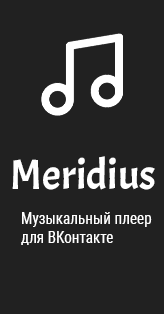
<style>
.page{position:relative;width:164px;height:314px;background:#212121}
.page>*{position:absolute;margin:0}
.t1{font:42.3px "Acme-Regular";color:#ffffff}
.t2{font:15.6px "RobotoCondensed-Regular";color:#ffffff;scale:0.97 1}
</style>
<div class="page">
<p class="t1" style="left:12px;top:156px;width:143px;height:34px">Meridius</p>
<p class="t2" style="left:21px;top:212px;width:131px;height:33px">Музыкальный плеер<br>для ВКонтакте</p>
</div>
